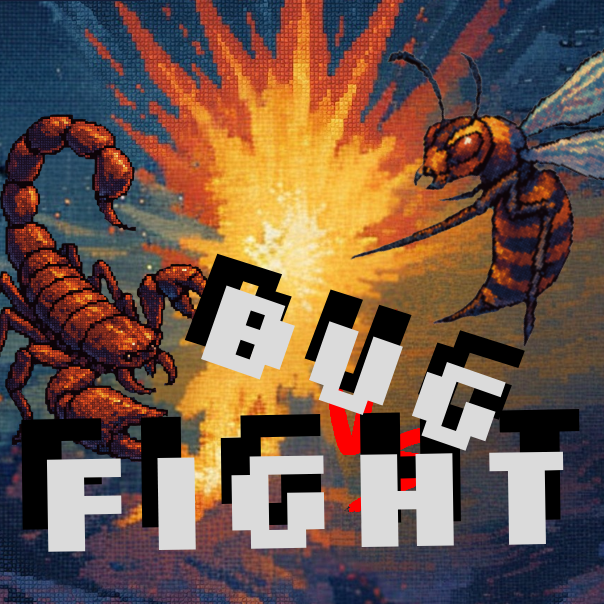
<style>
.page{position:relative;width:604px;height:604px}
.page>*{position:absolute;margin:0}
.t1{font:124.4px "Silkscreen-Bold";color:#dbdbdb}
.t2{font:147.5px "Silkscreen-Bold";color:#dbdbdb}
</style>
<div class="page">
<p class="t1" style="left:201px;top:285px;width:305px;height:166px;rotate:19deg">BUG</p>
<p class="t2" style="left:46px;top:451px;width:518px;height:101px;rotate:-1deg">FIGHT</p>
</div>
